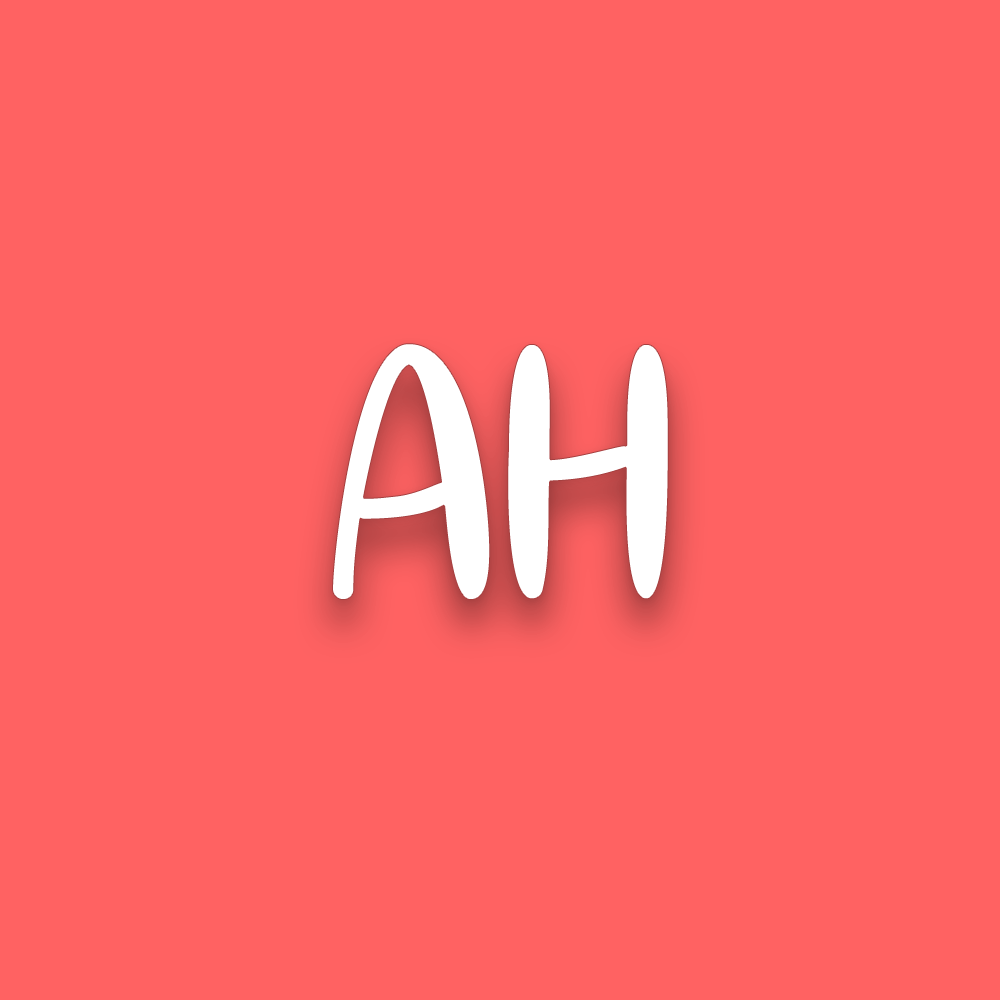
<style>
.page{position:relative;width:1000px;height:1000px;background:#ff6262}
.page>*{position:absolute;margin:0}
.t1{font:367.2px "CloudCalligraphy";color:#ffffff}
</style>
<div class="page">
<p class="t1" style="left:332px;top:343px;width:337px;height:257px">AH</p>
</div>
